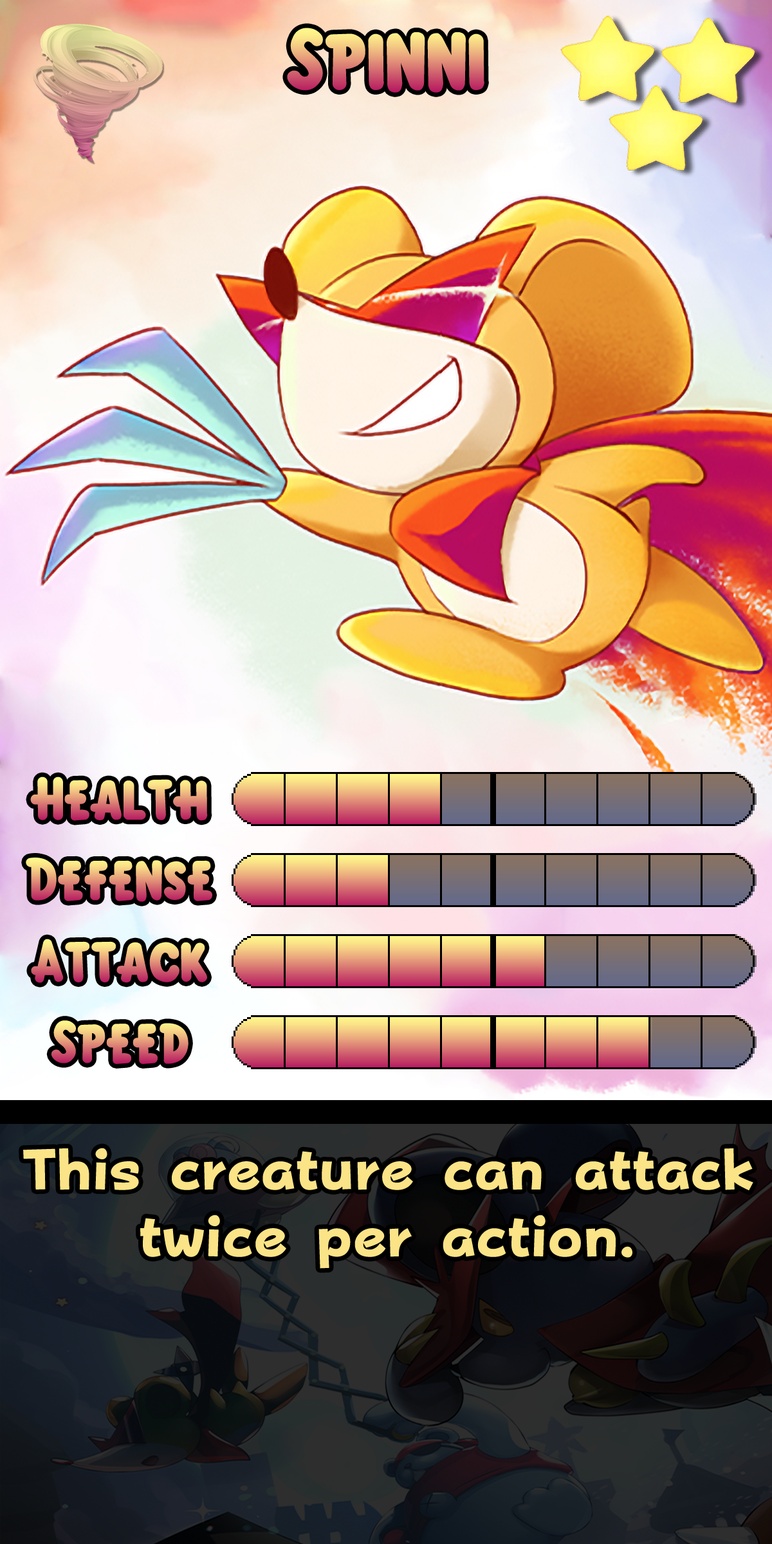
<style>
.page{position:relative;width:772px;height:1544px}
.page>*{position:absolute;margin:0}
.t1{font:135.1px "KirbyClassic"}
.t2{font:92.7px "KirbyClassic"}
.t3{font:98.4px "FOTPopHappinessStrp-ExtraBold";color:#fbe487}
</style>
<div class="page">
<p class="t1" style="left:287px;top:28px;width:198px;height:65px">Spinni</p>
<p class="t2" style="left:30px;top:777px;width:178px;height:44px">Health</p>
<p class="t2" style="left:26px;top:858px;width:186px;height:44px">Defense</p>
<p class="t2" style="left:31px;top:939px;width:176px;height:44px">Attack</p>
<p class="t2" style="left:51px;top:1021px;width:138px;height:43px">Speed</p>
<p class="t3" style="left:23px;top:1148px;width:730px;height:121px">This creature can attack twice per action.</p>
</div>
